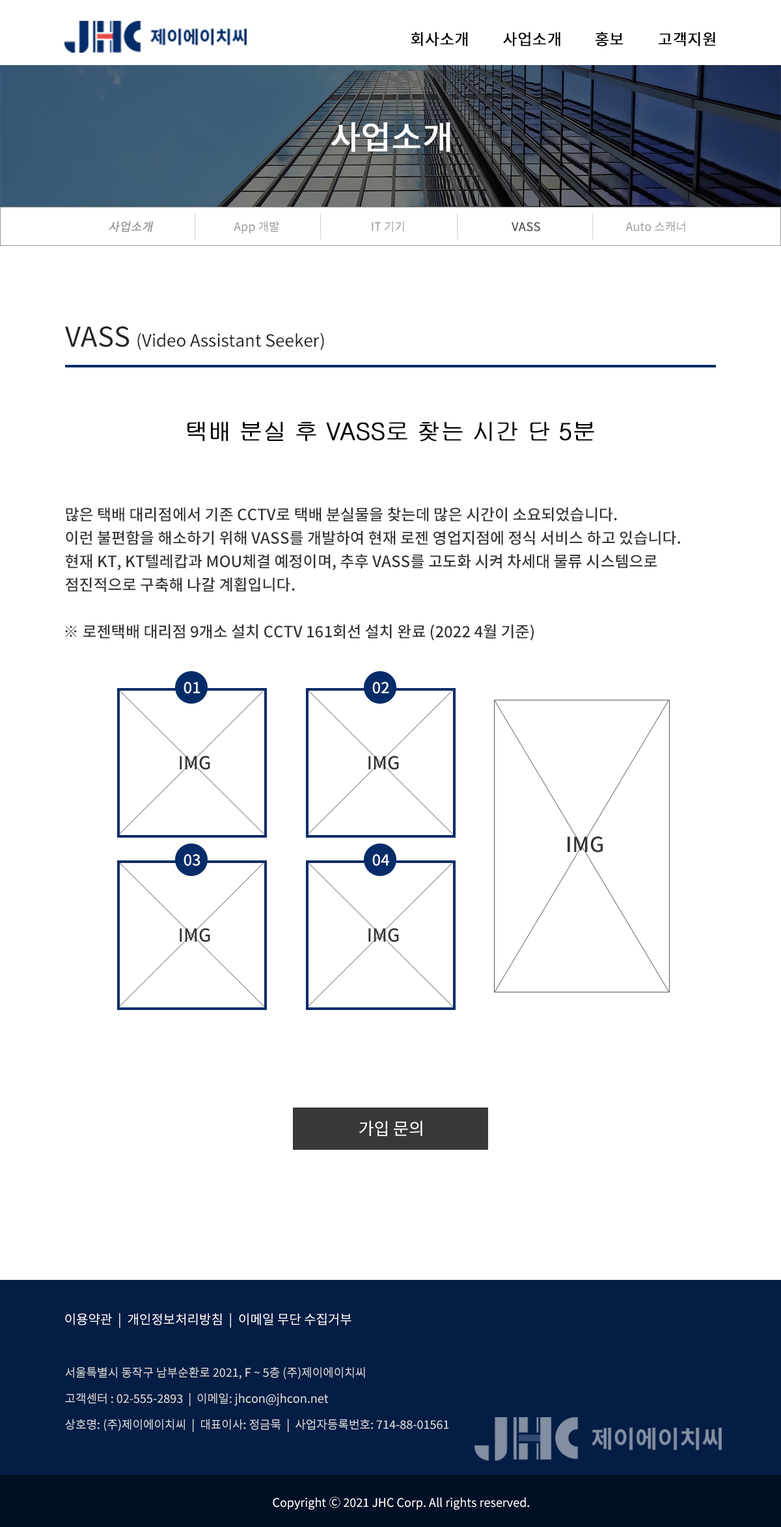
<style>
.page{position:relative;width:781px;height:1527px;background:#ffffff}
.page>*{position:absolute;margin:0}
.t1{font:15.6px "NotoSansKR-Regular";color:#000000;font-weight:bold}
.t2{font:32.5px "NotoSansKR-Regular";color:#ffffff;font-weight:bold}
.t3{font:11.7px "NotoSansKR-Regular";color:#959595;font-weight:bold;font-style:italic}
.t4{font:11.7px "NotoSansKR-Regular";color:#959595}
.t5{font:11.7px "NotoSansKR-Regular";color:#595959;font-weight:bold}
.t6{font:16.9px "NotoSansKR-Regular";color:#242424}
.t7{font:27.3px "NotoSansKR-Regular";color:#242424}
.t8{font:23.4px "Gulim";letter-spacing:-0.02em;color:#000000;font-weight:bold}
.t9{font:15.6px/23.4px "NotoSansKR-Medium";color:#333333}
.t10{font:15.6px "NotoSansKR-Medium";color:#333333}
.t11{font:15.6px "NotoSansKR-Medium";color:#f5f5f5}
.t12{font:18px "NotoSansKR-Medium";color:#333333}
.t13{font:20.8px "NotoSansKR-Medium";color:#333333}
.t14{font:16.9px "NotoSansKR-Regular";color:#ffffff}
.t15{font:13px "NotoSansKR-Regular";color:#ffffff}
.t16{font:11.7px/26px "NotoSansKR-Regular";color:#dddddd}
.t17{font:11.7px "NotoSansKR-Regular";color:#ffffff}
</style>
<div class="page">
<p class="t1" style="left:410px;top:32px;width:58px;height:14px">회사소개</p>
<p class="t1" style="left:503px;top:32px;width:57px;height:14px">사업소개</p>
<p class="t1" style="left:595px;top:32px;width:28px;height:14px">홍보</p>
<p class="t1" style="left:658px;top:32px;width:57px;height:14px">고객지원</p>
<p class="t2" style="left:331px;top:122px;width:119px;height:30px">사업소개</p>
<p class="t3" style="left:109px;top:221px;width:45px;height:11px">사업소개</p>
<p class="t4" style="left:234px;top:221px;width:45px;height:13px">App 개발</p>
<p class="t4" style="left:371px;top:221px;width:33px;height:11px">IT 기기</p>
<p class="t5" style="left:511px;top:222px;width:29px;height:10px">VASS</p>
<p class="t4" style="left:625px;top:221px;width:60px;height:11px">Auto 스캐너</p>
<p class="t6" style="left:65px;top:326px;width:259px;height:25px"><span class="t7">VASS </span>(Video Assistant Seeker)</p>
<p class="t8" style="left:187px;top:422px;width:407px;height:20px">택배 분실 후 VASS로 찾는 시간 단 5분</p>
<p class="t9" style="left:65px;top:507px;width:615px;height:85px">많은 택배 대리점에서 기존 CCTV로 택배 분실물을 찾는데 많은 시간이 소요되었습니다.<br>이런 불편함을 해소하기 위해 VASS를 개발하여 현재 로젠 영업지점에 정식 서비스 하고 있습니다.<br>현재 KT, KT텔레캅과 MOU체결 예정이며, 추후 VASS를 고도화 시켜 차세대 물류 시스템으로<br>점진적으로 구축해 나갈 계횝입니다.</p>
<p class="t10" style="left:65px;top:625px;width:468px;height:16px">※ 로젠택배 대리점 9개소 설치 CCTV 161회선 설치 완료 (2022 4월 기준)</p>
<p class="t11" style="left:183px;top:682px;width:17px;height:12px">01</p>
<p class="t11" style="left:372px;top:682px;width:17px;height:12px">02</p>
<p class="t12" style="left:180px;top:756px;width:30px;height:14px">IMG</p>
<p class="t12" style="left:368px;top:756px;width:31px;height:14px">IMG</p>
<p class="t13" style="left:567px;top:837px;width:35px;height:16px">IMG</p>
<p class="t11" style="left:183px;top:854px;width:17px;height:13px">03</p>
<p class="t11" style="left:372px;top:854px;width:17px;height:13px">04</p>
<p class="t12" style="left:180px;top:928px;width:30px;height:15px">IMG</p>
<p class="t12" style="left:368px;top:928px;width:31px;height:15px">IMG</p>
<p class="t14" style="left:359px;top:1121px;width:63px;height:16px">가입 문의</p>
<p class="t15" style="left:65px;top:1313px;width:286px;height:15px">이용약관  |  개인정보처리방침  |  이메일 무단 수집거부</p>
<p class="t16" style="left:65px;top:1367px;width:384px;height:65px">서울특별시 동작구 남부순환로 2021, F ~ 5층 (주)제이에이치씨<br>고객센터 : 02-555-2893  |  이메일: jhcon@jhcon.net<br>상호명: (주)제이에이치씨  |  대표이사: 정금묵  |  사업자등록번호: 714-88-01561</p>
<p class="t17" style="left:273px;top:1497px;width:256px;height:14px">Copyright Ⓒ 2021 JHC Corp. All rights reserved.</p>
</div>
